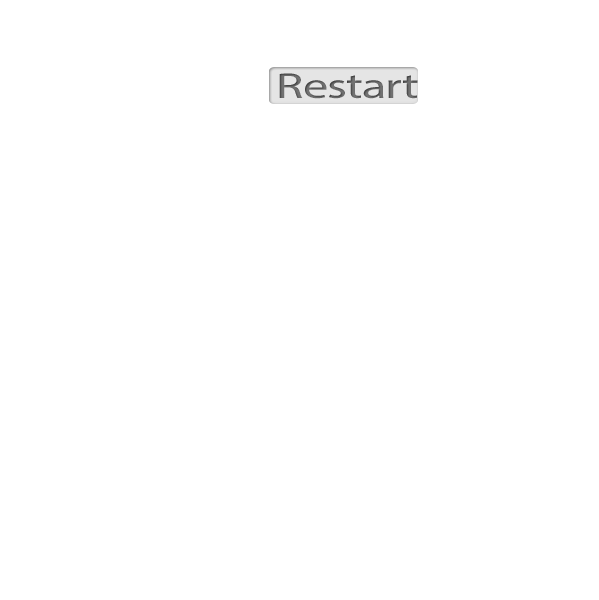
<style>
.page{position:relative;width:599px;height:600px;background:#ffffff}
.page>*{position:absolute;margin:0}
.t1{font:36px "MyriadPro-Regular";letter-spacing:-0.02em;color:#676767;scale:1.41 1}
</style>
<div class="page">
<p class="t1" style="left:279px;top:73px;width:139px;height:26px">Restart</p>
</div>
